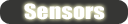
<style>
.page{position:relative;width:128px;height:24px;background:#363634}
.page>*{position:absolute;margin:0}
.t1{font:19.2px "Impact";color:#ffffff;scale:1.25 1}
</style>
<div class="page">
<p class="t1" style="left:24px;top:3px;width:81px;height:17px">Sensors</p>
</div>
